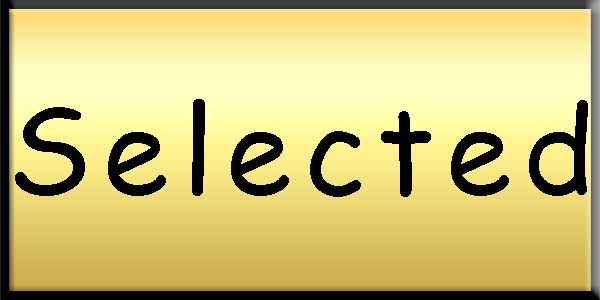
<style>
.page{position:relative;width:600px;height:300px}
.page>*{position:absolute;margin:0}
.t1{font:120px "ComicSansMS";letter-spacing:0.1em;color:#000000}
.t2{font:352px "MonotypeCorsiva";letter-spacing:0.1em;color:#e21d1d}
</style>
<div class="page">
<p class="t1" style="left:15px;top:99px;width:573px;height:98px"><span class="t2"><br></span>Selected</p>
</div>
